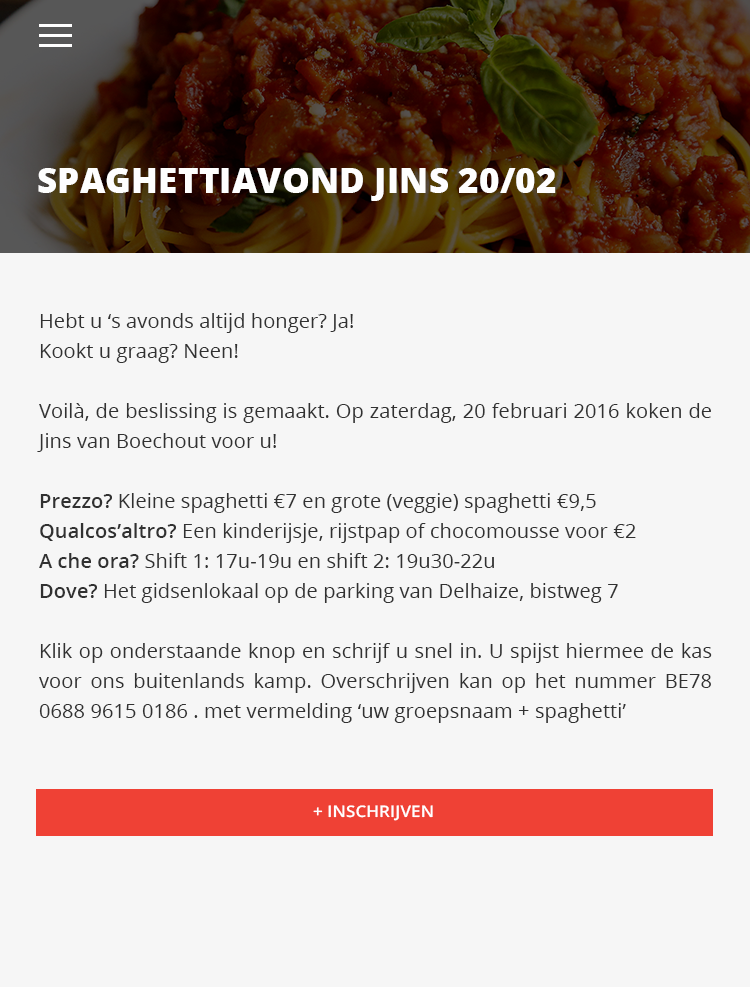
<style>
.page{position:relative;width:750px;height:987px;background:#f6f6f6}
.page>*{position:absolute;margin:0}
.t1{font:35px "OpenSans-Extrabold";letter-spacing:0.005em;color:#fefefe;text-transform:uppercase}
.t2{font:20px/30px "OpenSans";letter-spacing:0.005em;color:#313131}
.t3{font:20px/30px "OpenSans-Semibold";letter-spacing:0.005em;color:#313131}
.t4{font:16px "OpenSans-Semibold";letter-spacing:0.005em;color:#ffffff;text-transform:uppercase;scale:1.06 1}
</style>
<div class="page">
<p class="t1" style="left:38px;top:168px;width:518px;height:33px">Spaghettiavond Jins 20/02</p>
<p class="t2" style="left:37px;top:313px;width:675px;height:410px;text-align:justify">Hebt u ‘s avonds altijd honger? Ja! <br>Kookt u graag? Neen! <br><br>Voilà, de beslissing is gemaakt. Op zaterdag, 20 februari 2016 koken de Jins van Boechout voor u!<br><br><span class="t3">Prezzo? </span>Kleine spaghetti €7 en grote (veggie) spaghetti €9,5 <br><span class="t3">Qualcos’altro?</span> Een kinderijsje, rijstpap of chocomousse voor €2 <br><span class="t3">A che ora?</span> Shift 1: 17u-19u en shift 2: 19u30-22u <br><span class="t3">Dove? </span>Het gidsenlokaal op de parking van Delhaize, bistweg 7<br><br>Klik op onderstaande knop en schrijf u snel in. U spijst hiermee de kas voor ons buitenlands kamp. Overschrijven kan op het nummer BE78 0688 9615 0186 . met vermelding ‘uw groepsnaam + spaghetti’</p>
<p class="t4" style="left:313px;top:805px;width:120px;height:16px">+ inschrijven</p>
</div>
